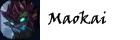
<style>
.page{position:relative;width:140px;height:40px;background:#ffffff}
.page>*{position:absolute;margin:0}
.t1{font:12px "VinerHandITC";color:#000000}
</style>
<div class="page">
<p class="t1" style="left:48px;top:10px;width:59px;height:15px">Maokai</p>
</div>
